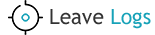
<style>
.page{position:relative;width:155px;height:35px;background:#ffffff}
.page>*{position:absolute;margin:0}
.t1{font:21px "TrebuchetMS";color:#333333}
.t2{font:21px "TrebuchetMS";color:#17a2b8}
</style>
<div class="page">
<p class="t1" style="left:50px;top:9px;width:101px;height:20px">Leave <span class="t2">Logs</span></p>
</div>
